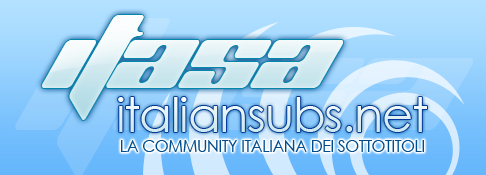
<style>
.page{position:relative;width:486px;height:175px}
.page>*{position:absolute;margin:0}
.t1{font:90px "PlanetKosmos";letter-spacing:-0.025em;color:#daedf2}
.t2{font:48px "CenturyGothic";letter-spacing:-0.025em;color:#dff0f4}
.t3{font:16px "CenturyGothic";letter-spacing:-0.025em;color:#004c8c}
</style>
<div class="page">
<p class="t1" style="left:41px;top:15px;width:303px;height:105px">itasa</p>
<p class="t2" style="left:118px;top:97px;width:309px;height:35px">italiansubs.net</p>
<p class="t3" style="left:121px;top:140px;width:303px;height:12px">LA COMMUNITY ITALIANA DEI SOTTOTITOLI</p>
</div>
